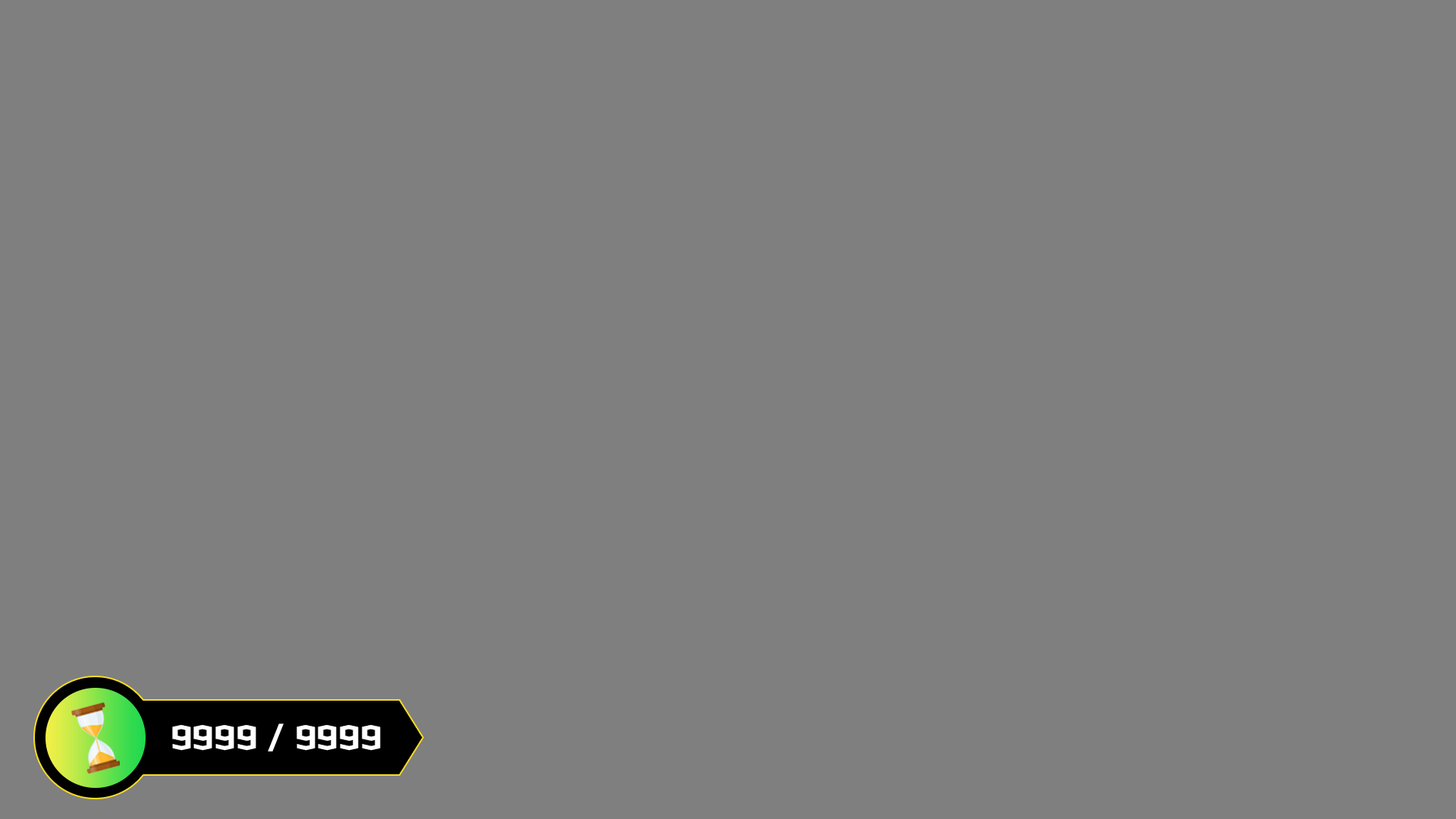
<style>
.page{position:relative;width:1456px;height:819px;background:#7f7f7f}
.page>*{position:absolute;margin:0}
.t1{font:30.3px "SDMapssi";color:#ffffff}
</style>
<div class="page">
<p class="t1" style="left:172px;top:723px;width:209px;height:28px">9999 / 9999</p>
</div>
